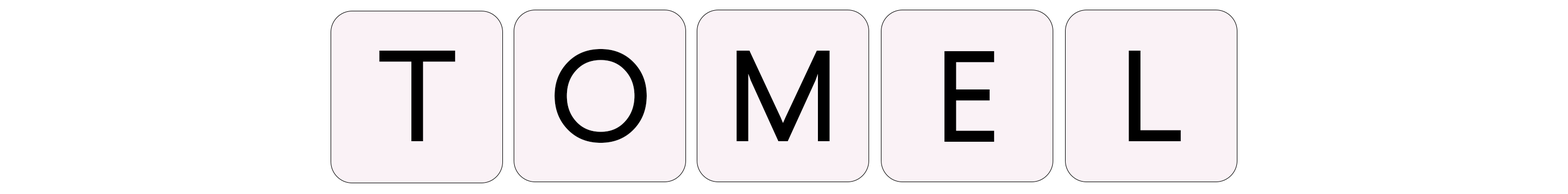
<style>
.page{position:relative;width:1568px;height:194px;background:#ffffff}
.page>*{position:absolute;margin:0}
.t1{font:129.2px "Larsseit";color:#000000}
</style>
<div class="page">
<p class="t1" style="left:379px;top:50px;width:77px;height:91px">T</p>
<p class="t1" style="left:555px;top:48px;width:92px;height:95px">O</p>
<p class="t1" style="left:737px;top:51px;width:93px;height:90px">M</p>
<p class="t1" style="left:944px;top:51px;width:51px;height:91px">E</p>
<p class="t1" style="left:1129px;top:51px;width:52px;height:91px">L</p>
</div>
